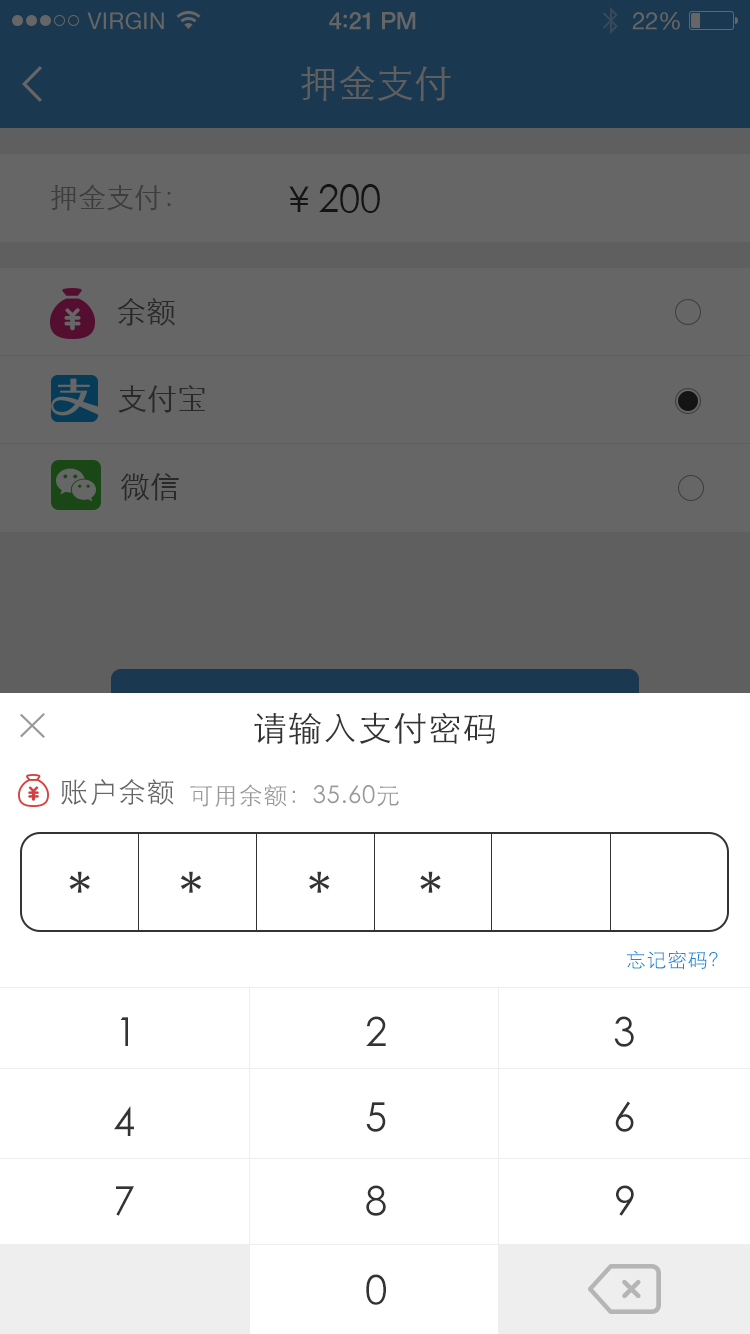
<style>
.page{position:relative;width:750px;height:1334px;background:#ffffff}
.page>*{position:absolute;margin:0}
.t1{font:23px "HelveticaNeue";letter-spacing:0.02em;color:#666666}
.t2{font:24px "HelveticaNeue-Medium";letter-spacing:-0.02em;color:#666666}
.t3{font:26px "Avenir-Medium";letter-spacing:-0.02em;color:#666666}
.t4{font:24px "HelveticaNeue";letter-spacing:-0.02em;color:#666666}
.t5{font:38px "STXihei";color:#5f5f5f}
.t6{font:28px "STXihei";color:#3d3d3d}
.t7{font:38px "STXihei";color:#141414}
.t8{font:30px "STXihei";color:#292929}
.t9{font:34px "STXihei";letter-spacing:0.03em;color:#333333}
.t10{font:28px "STXihei";letter-spacing:0.03em;color:#666666}
.t11{font:24px "STXihei";letter-spacing:0.03em;color:#999999}
.t12{font:60px "STXihei";letter-spacing:0.03em;color:#333333}
.t13{font:20px "STXihei";letter-spacing:0.03em;color:#1789d5}
.t14{font:40px "STXihei";letter-spacing:0.03em;color:#333333}
</style>
<div class="page">
<p class="t1" style="left:87px;top:12px;width:77px;height:18px">VIRGIN</p>
<p class="t2" style="left:329px;top:12px;width:87px;height:18px">4<span class="t3">:</span>21 PM</p>
<p class="t4" style="left:632px;top:12px;width:48px;height:18px">22%</p>
<p class="t5" style="left:301px;top:65px;width:150px;height:36px">押金支付</p>
<p class="t6" style="left:51px;top:184px;width:120px;height:27px">押金支付：</p>
<p class="t7" style="left:289px;top:184px;width:91px;height:29px">￥200</p>
<p class="t8" style="left:117px;top:298px;width:58px;height:28px">余额</p>
<p class="t8" style="left:118px;top:385px;width:87px;height:28px">支付宝</p>
<p class="t8" style="left:120px;top:473px;width:59px;height:28px">微信</p>
<p class="t9" style="left:254px;top:712px;width:241px;height:33px">请输入支付密码</p>
<p class="t10" style="left:61px;top:779px;width:113px;height:26px">账户余额</p>
<p class="t11" style="left:190px;top:784px;width:209px;height:23px">可用余额：35.60元</p>
<p class="t12" style="left:69px;top:871px;width:372px;height:22px">*     *      *     *</p>
<p class="t13" style="left:627px;top:950px;width:91px;height:20px">忘记密码？</p>
<p class="t14" style="left:120px;top:1017px;width:8px;height:29px">1</p>
<p class="t14" style="left:366px;top:1016px;width:20px;height:30px">2</p>
<p class="t14" style="left:614px;top:1016px;width:20px;height:31px">3</p>
<p class="t14" style="left:114px;top:1106px;width:20px;height:30px">4</p>
<p class="t14" style="left:366px;top:1102px;width:20px;height:30px">5</p>
<p class="t14" style="left:615px;top:1101px;width:19px;height:31px">6</p>
<p class="t14" style="left:116px;top:1186px;width:18px;height:30px">7</p>
<p class="t14" style="left:366px;top:1185px;width:20px;height:31px">8</p>
<p class="t14" style="left:616px;top:1185px;width:18px;height:31px">9</p>
<p class="t14" style="left:366px;top:1274px;width:20px;height:31px">0</p>
</div>
